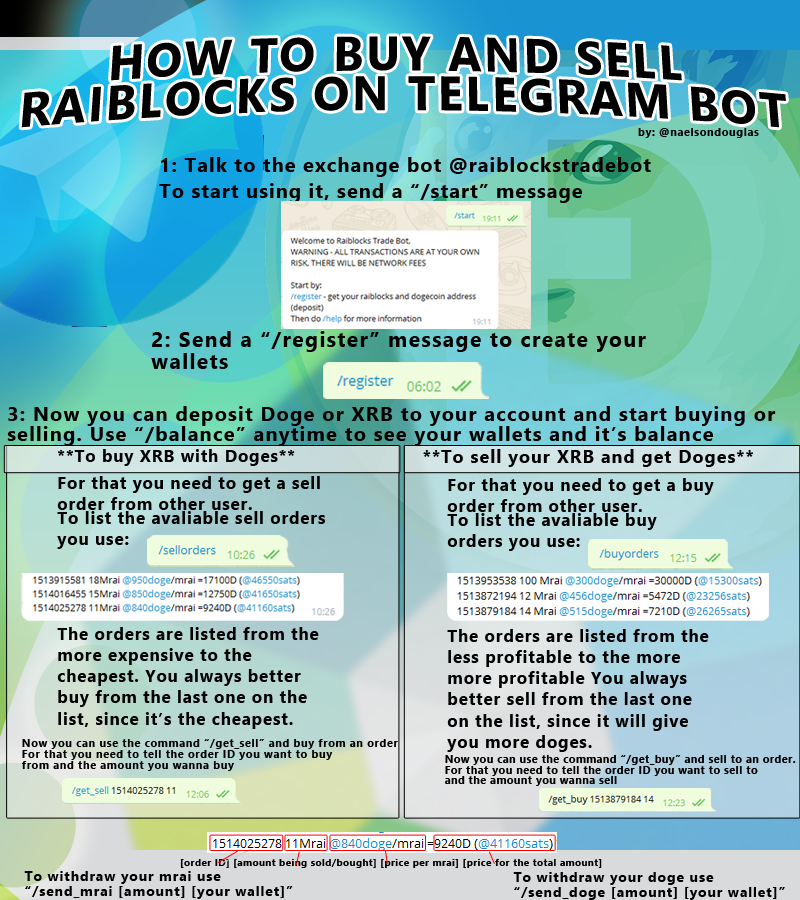
<style>
.page{position:relative;width:800px;height:900px}
.page>*{position:absolute;margin:0}
.t1{font:47px/39.8px "LeelawadeeUI-Bold";letter-spacing:0.055em;color:#000000}
.t2{font:11px "LeelawadeeUI-Bold";letter-spacing:0.055em;color:#000000}
.t3{font:19.8px/20.1px "LeelawadeeUI-Bold";letter-spacing:0.055em;color:#000000}
.t4{font:21.4px/21.8px "LeelawadeeUI-Bold";letter-spacing:0.055em;color:#000000}
.t5{font:20.2px/20.5px "LeelawadeeUI-Bold";letter-spacing:0.055em;color:#000000}
.t6{font:16.8px/21.3px "LeelawadeeUI-Bold";letter-spacing:0.055em;color:#000000}
.t7{font:18px "LeelawadeeUI-Bold";letter-spacing:0.055em;color:#000000}
.t8{font:10.6px "LeelawadeeUI-Bold";letter-spacing:0.055em;color:#000000}
.t9{font:9.7px "LeelawadeeUI-Bold";letter-spacing:0.055em;color:#000000}
.t10{font:14.1px/14.4px "LeelawadeeUI-Bold";letter-spacing:0.055em;color:#000000}
</style>
<div class="page">
<p class="t1" style="left:21px;top:36px;width:765px;height:92px;text-align:center">HOW TO BUY AND SELL<br> RAIBLOCKS ON TELEGRAM BOT</p>
<p class="t2" style="left:638px;top:128px;width:121px;height:10px">by: @naelsondouglas</p>
<p class="t3" style="left:159px;top:157px;width:492px;height:46px">1: Talk to the exchange bot @raiblockstradebot<br><br>To start using it, send a “/start” message</p>
<p class="t4" style="left:151px;top:331px;width:495px;height:38px">2: Send a “/register” message to create your wallets</p>
<p class="t5" style="left:7px;top:406px;width:769px;height:40px">3: Now you can deposit Doge or XRB to your account and start buying or selling. Use “/balance” anytime to see your wallets and it’s balance</p>
<p class="t6" style="left:57px;top:449px;width:268px;height:280px">**To buy XRB with Doges**<br><br>For that you need to get a sell order from other user.<br>To list the avaliable sell orders you use:<br><br><br><br><br><br><br>The orders are listed from the more expensive to the cheapest. You always better buy from the last one on the list, since it’s the cheapest.</p>
<p class="t7" style="left:423px;top:449px;width:330px;height:18px">**To sell your XRB and get Doges**</p>
<p class="t6" style="left:447px;top:478px;width:267px;height:274px">For that you need to get a buy order from other user.<br>To list the avaliable buy orders you use:<br><br><br><br><br><br><br>The orders are listed from the less profitable to the more more profitable You always better sell from the last one on the list, since it will give you more doges.</p>
<p class="t2" style="left:22px;top:739px;width:376px;height:10px">Now you can use the command “/get_sell” and buy from an order</p>
<p class="t2" style="left:22px;top:750px;width:311px;height:10px">For that you need to tell the order ID you want to buy</p>
<p class="t2" style="left:21px;top:761px;width:213px;height:10px">from and the amount you wanna buy</p>
<p class="t8" style="left:445px;top:755px;width:351px;height:10px">Now you can use the command “/get_buy” and sell to an order.</p>
<p class="t8" style="left:445px;top:766px;width:313px;height:10px">For that you need to tell the order ID you want to sell to</p>
<p class="t8" style="left:445px;top:776px;width:172px;height:10px">and the amount you wanna sell</p>
<p class="t9" style="left:180px;top:859px;width:422px;height:9px">[order ID] [amount being sold/bought] [price per mrai] [price for the total amount]</p>
<p class="t10" style="left:24px;top:871px;width:269px;height:28px">To withdraw your mrai use<br>“/send_mrai [amount] [your wallet]”</p>
<p class="t10" style="left:513px;top:872px;width:272px;height:28px">To withdraw your doge use<br>“/send_doge [amount] [your wallet]”</p>
</div>
